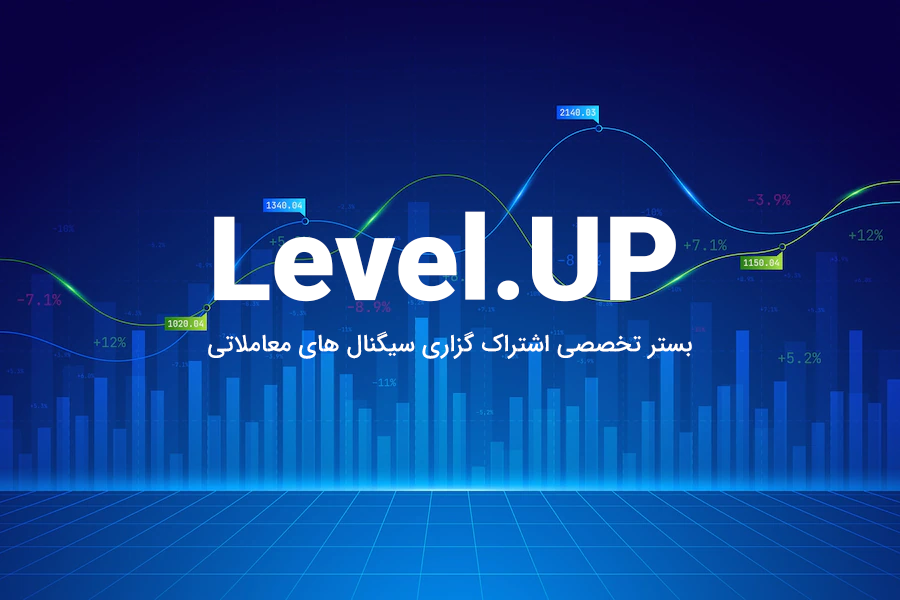
<style>
.page{position:relative;width:900px;height:600px}
.page>*{position:absolute;margin:0}
.t1{font:117px "IRANSans-Black";color:#ffffff}
.t2{font:24px "IRANSans-Medium";color:#ffffff}
</style>
<div class="page">
<p class="t1" style="left:214px;top:211px;width:462px;height:91px">Level.UP</p>
<p class="t2" style="left:208px;top:331px;width:484px;height:28px">بستر تخصصی اشتراک گزاری سیگنال های معاملاتی‌</p>
</div>
